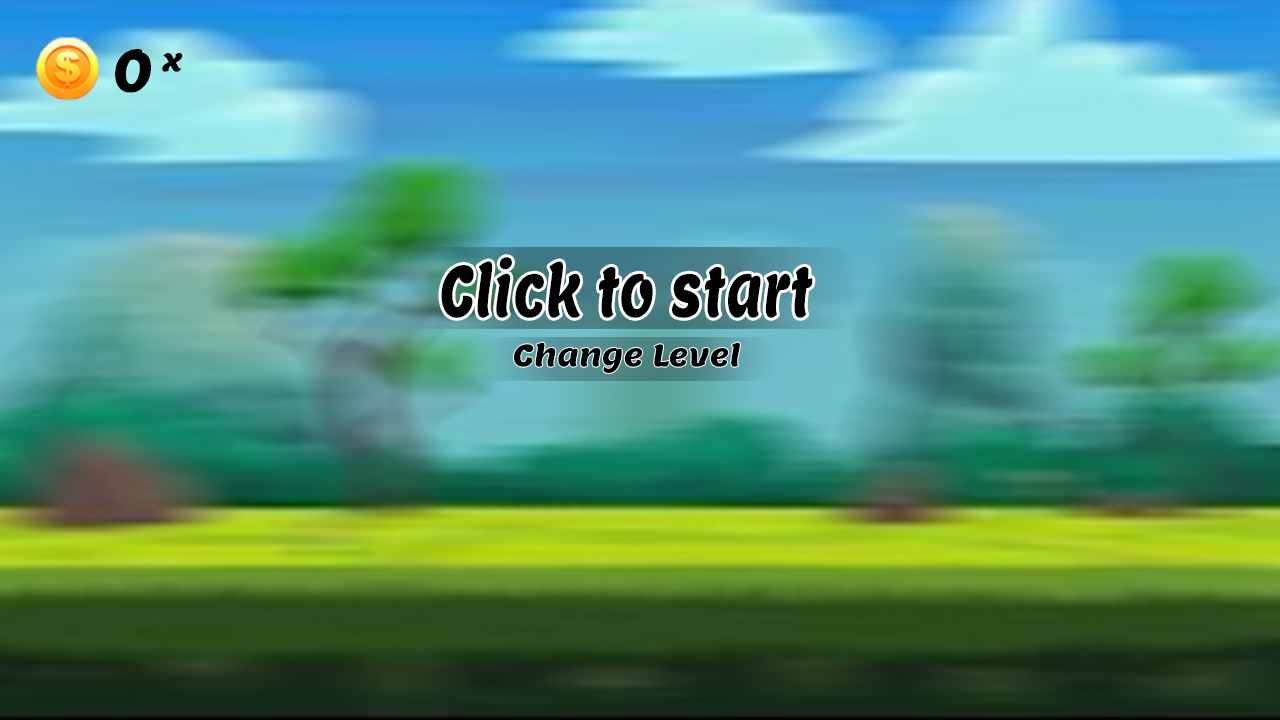
<style>
.page{position:relative;width:1280px;height:720px}
.page>*{position:absolute;margin:0}
.t1{font:59.9px "Lemon-Regular";color:#000000;scale:0.93 1}
.t2{font:30px "Lemon-Regular";color:#000000}
.t3{font:70.3px "Lemon-Regular";color:#000000;scale:0.71 1}
</style>
<div class="page">
<p class="t1" style="left:115px;top:49px;width:36px;height:44px;rotate:-3deg">0</p>
<p class="t2" style="left:162px;top:53px;width:21px;height:19px">x</p>
<p class="t3" style="left:441px;top:257px;width:372px;height:61px">Click to start</p>
<p class="t2" style="left:514px;top:342px;width:226px;height:31px">Change Level</p>
</div>
